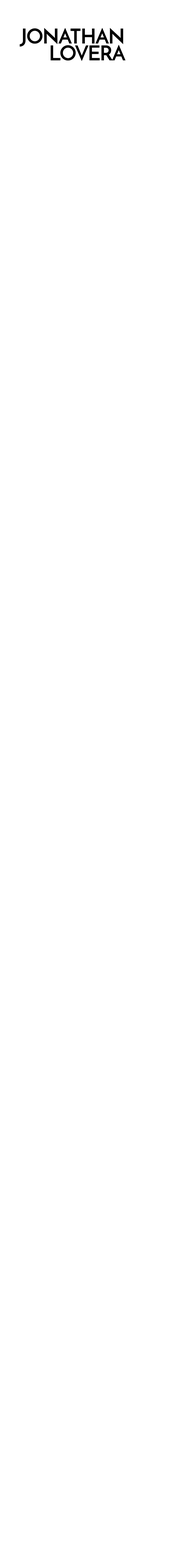
<style>
.page{position:relative;width:196px;height:1568px;background:#ffffff}
.page>*{position:absolute;margin:0}
.t1{font:20.5px/16.9px "JosefinSans-Bold";letter-spacing:-0.035em;color:#000000}
</style>
<div class="page">
<p class="t1" style="left:20px;top:28px;width:106px;height:33px;text-align:right">JONATHAN<br>LOVERA</p>
</div>
